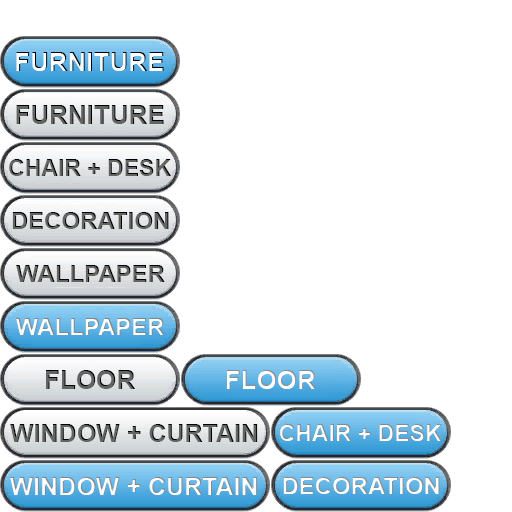
<style>
.page{position:relative;width:512px;height:512px;background:#ffffff}
.page>*{position:absolute;margin:0}
.t1{font:26px "Arial-BoldMT";color:#ffffff}
.t2{font:26px "Arial-BoldMT";color:#636563}
.t3{font:23px "Arial-BoldMT";color:#636563}
.t4{font:24px "Arial-BoldMT";color:#636563}
.t5{font:24px "Arial-BoldMT";color:#ffffff}
.t6{font:25px "Arial-BoldMT";color:#636563}
.t7{font:23px "Arial-BoldMT";color:#ffffff}
.t8{font:25px "Arial-BoldMT";color:#ffffff}
</style>
<div class="page">
<p class="t1" style="left:16px;top:52px;width:148px;height:19px">FURNITURE</p>
<p class="t2" style="left:16px;top:105px;width:148px;height:19px">FURNITURE</p>
<p class="t3" style="left:9px;top:159px;width:162px;height:17px">CHAIR + DESK</p>
<p class="t4" style="left:12px;top:212px;width:157px;height:17px">DECORATION</p>
<p class="t4" style="left:16px;top:265px;width:149px;height:17px">WALLPAPER</p>
<p class="t5" style="left:16px;top:318px;width:149px;height:17px">WALLPAPER</p>
<p class="t2" style="left:46px;top:370px;width:89px;height:19px">FLOOR</p>
<p class="t1" style="left:227px;top:370px;width:89px;height:19px">FLOOR</p>
<p class="t6" style="left:10px;top:424px;width:248px;height:18px">WINDOW + CURTAIN</p>
<p class="t7" style="left:280px;top:424px;width:162px;height:17px">CHAIR + DESK</p>
<p class="t8" style="left:10px;top:477px;width:248px;height:18px">WINDOW + CURTAIN</p>
<p class="t5" style="left:283px;top:477px;width:157px;height:17px">DECORATION</p>
</div>
